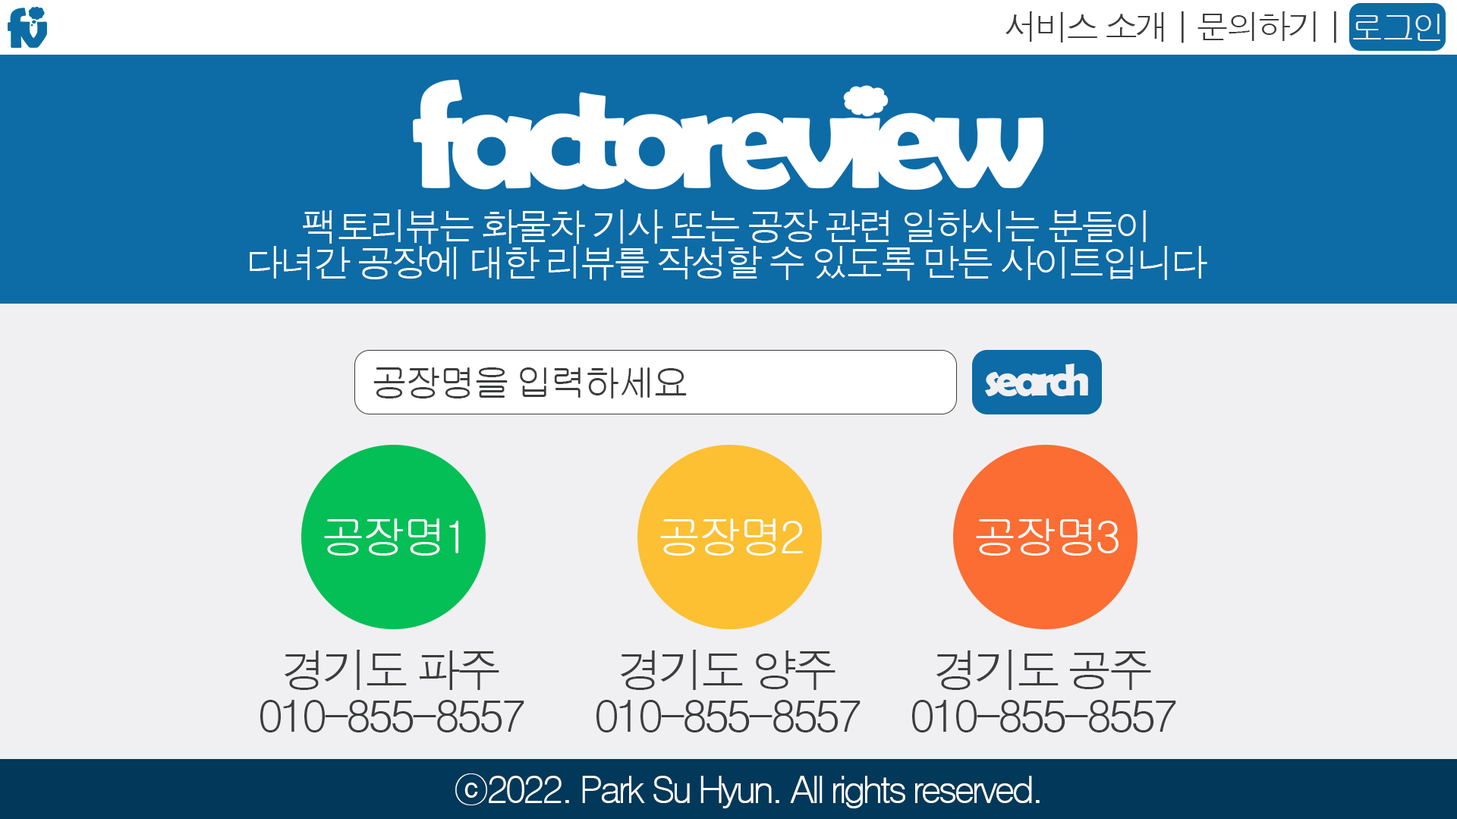
<style>
.page{position:relative;width:1457px;height:819px;background:#f0f0f2}
.page>*{position:absolute;margin:0}
.t1{font:34.1px "Dotum";letter-spacing:-0.1em;color:#3b3d3c}
.t2{font:34.1px "Gulim";letter-spacing:-0.1em;color:#f0f0f2}
.t3{font:37.9px/36.4px "Dotum";letter-spacing:-0.1em;color:#ffffff}
.t4{font:45.5px "BerlinSansFBDemi-Bold";letter-spacing:-0.1em;color:#f0f0f2}
.t5{font:37.9px "Gulim";letter-spacing:-0.1em;color:#3b3d3c}
.t6{font:45.5px "Gulim";letter-spacing:-0.1em;color:#ffffff}
.t7{font:45.5px/45.5px "Dotum";letter-spacing:-0.1em;color:#3b3d3c}
.t8{font:37.9px "Dotum";letter-spacing:-0.1em;color:#ffffff}
</style>
<div class="page">
<p class="t1" style="left:1005px;top:11px;width:331px;height:32px">서비스 소개 | 문의하기 |</p>
<p class="t2" style="left:1353px;top:14px;width:87px;height:27px">로그인</p>
<p class="t3" style="left:250px;top:209px;width:957px;height:72px;text-align:center">팩토리뷰는 화물차 기사 또는 공장 관련 일하시는 분들이<br>다녀간 공장에 대한 리뷰를 작성할 수 있도록 만든 사이트입니다</p>
<p class="t4" style="left:985px;top:363px;width:103px;height:33px">search</p>
<p class="t5" style="left:373px;top:367px;width:314px;height:31px">공장명을 입력하세요</p>
<p class="t6" style="left:324px;top:518px;width:134px;height:37px">공장명1</p>
<p class="t6" style="left:660px;top:518px;width:143px;height:37px">공장명2</p>
<p class="t6" style="left:976px;top:518px;width:142px;height:37px">공장명3</p>
<p class="t7" style="left:260px;top:649px;width:264px;height:83px;text-align:center">경기도 파주<br>010-855-8557</p>
<p class="t7" style="left:596px;top:649px;width:264px;height:83px;text-align:center">경기도 양주<br>010-855-8557</p>
<p class="t7" style="left:912px;top:649px;width:264px;height:83px;text-align:center">경기도 공주<br>010-855-8557</p>
<p class="t8" style="left:455px;top:773px;width:584px;height:35px">ⓒ2022. Park Su Hyun. All rights reserved.</p>
</div>
